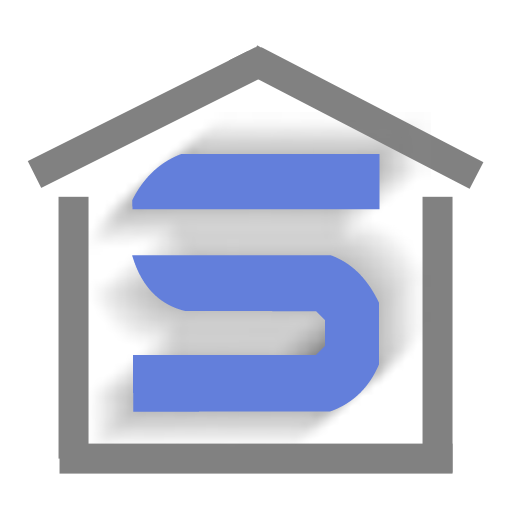
<style>
.page{position:relative;width:512px;height:512px;background:#ffffff}
.page>*{position:absolute;margin:0}
.t1{font:384px "Futura";color:#637fdb}
</style>
<div class="page">
<p class="t1" style="left:132px;top:154px;width:248px;height:258px">S</p>
</div>
